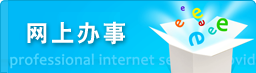
<style>
.page{position:relative;width:256px;height:73px}
.page>*{position:absolute;margin:0}
.t1{font:24px "ç»å¸ç²é»ç®-regular";letter-spacing:0.075em;color:#ffffff}
</style>
<div class="page">
<p class="t1" style="left:27px;top:21px;width:98px;height:24px">网上办事</p>
</div>
